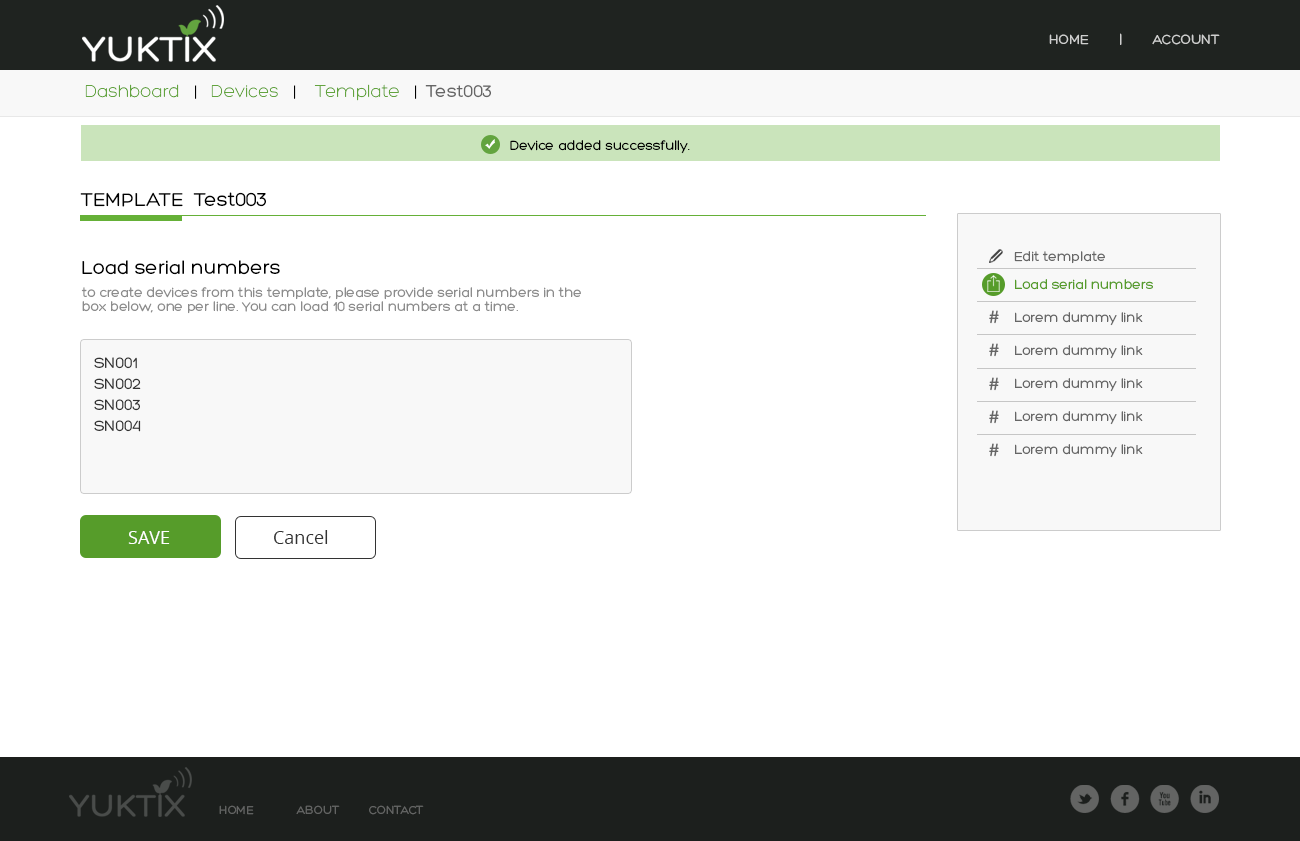
<style>
.page{position:relative;width:1300px;height:841px;background:#ffffff}
.page>*{position:absolute;margin:0}
.t1{font:14px "Hero";color:#cecfce;text-transform:uppercase}
.t2{font:18px "Hero-Light";color:#63a43f}
.t3{font:18px "Hero-Light";color:#000000}
.t4{font:18px "Hero";color:#666666}
.t5{font:14px "Hero";color:#000000}
.t6{font:20px "Hero";color:#000000;text-transform:uppercase}
.t7{font:20px "Hero";color:#000000}
.t8{font:14px "Hero";color:#666666}
.t9{font:14px/33px "Hero";color:#666666}
.t10{font:14px/33px "Hero";color:#569c2a}
.t11{font:14px/14px "Hero";color:#8c8c8c}
.t12{font:20px "Hero";color:#666666}
.t13{font:16px/21px "Hero";color:#333333;text-transform:uppercase}
.t14{font:18px "OpenSans";color:#ffffff}
.t15{font:18px "OpenSans";color:#333333}
.t16{font:40.5px "Socialico";letter-spacing:0.2em;color:#636463}
.t17{font:12.2px "Hero";color:#636463;text-transform:uppercase}
</style>
<div class="page">
<p class="t1" style="left:1049px;top:33px;width:171px;height:12px">home        |        Account</p>
<p class="t2" style="left:85px;top:84px;width:406px;height:17px">Dashboard<span class="t3">   |   </span>Devices   <span class="t3">|    </span>Template   <span class="t3">|  </span><span class="t4">Test003</span></p>
<p class="t5" style="left:510px;top:140px;width:180px;height:14px">Device added successfully.</p>
<p class="t6" style="left:80px;top:192px;width:186px;height:15px">template  <span class="t7">Test003</span></p>
<p class="t8" style="left:1014px;top:251px;width:91px;height:13px">Edit template</p>
<p class="t7" style="left:82px;top:260px;width:198px;height:15px">Load serial numbers</p>
<p class="t9" style="left:1015px;top:279px;width:138px;height:179px"><span class="t10">Load serial numbers<br></span>Lorem dummy link<br>Lorem dummy link<br>Lorem dummy link<br>Lorem dummy link<br>Lorem dummy link</p>
<p class="t11" style="left:81px;top:287px;width:500px;height:27px">to create devices from this template, please provide serial numbers in the <br>box below, one per line. You can load 10 serial numbers at a time.</p>
<p class="t12" style="left:989px;top:310px;width:10px;height:14px">#</p>
<p class="t12" style="left:989px;top:343px;width:10px;height:14px">#</p>
<p class="t13" style="left:94px;top:357px;width:47px;height:75px">sn001<br>sn002<br>sn003<br>sn004</p>
<p class="t12" style="left:989px;top:377px;width:10px;height:14px">#</p>
<p class="t12" style="left:989px;top:410px;width:10px;height:14px">#</p>
<p class="t12" style="left:989px;top:443px;width:10px;height:14px">#</p>
<p class="t14" style="left:128px;top:531px;width:42px;height:13px">SAVE</p>
<p class="t15" style="left:274px;top:530px;width:54px;height:14px">Cancel</p>
<p class="t16" style="left:1070px;top:785px;width:149px;height:28px">lfxi</p>
<p class="t17" style="left:219px;top:805px;width:205px;height:10px">home             About         Contact</p>
</div>
